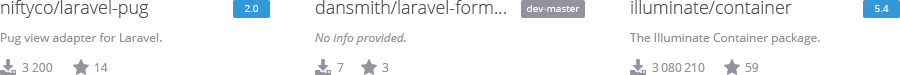
<style>
.page{position:relative;width:900px;height:75px;background:#ffffff}
.page>*{position:absolute;margin:0}
.t1{font:18px "OpenSans-Light";color:#52525c}
.t2{font:10px "OpenSans";color:#ffffff}
.t3{font:12px "OpenSans";color:#93939e}
.t4{font:12px "OpenSans-Italic";color:#93939e}
</style>
<div class="page">
<p class="t1" style="left:1px;top:0px;width:148px;height:18px">niftyco/laravel-pug</p>
<p class="t2" style="left:244px;top:5px;width:15px;height:7px">2.0</p>
<p class="t1" style="left:315px;top:0px;width:191px;height:14px">dansmith/laravel-form…</p>
<p class="t2" style="left:527px;top:5px;width:53px;height:7px">dev-master</p>
<p class="t1" style="left:631px;top:0px;width:161px;height:14px">illuminate/container</p>
<p class="t2" style="left:875px;top:5px;width:14px;height:7px">5.4</p>
<p class="t3" style="left:1px;top:33px;width:161px;height:12px">Pug view adapter for Laravel.</p>
<p class="t4" style="left:315px;top:33px;width:91px;height:12px">No info provided.</p>
<p class="t3" style="left:630px;top:33px;width:190px;height:12px">The Illuminate Container package.</p>
<p class="t3" style="left:22px;top:63px;width:31px;height:9px">3 200</p>
<p class="t3" style="left:95px;top:63px;width:13px;height:9px">14</p>
<p class="t3" style="left:337px;top:63px;width:7px;height:9px">7</p>
<p class="t3" style="left:382px;top:63px;width:7px;height:9px">3</p>
<p class="t3" style="left:652px;top:63px;width:53px;height:9px">3 080 210</p>
<p class="t3" style="left:745px;top:63px;width:14px;height:9px">59</p>
</div>
